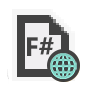
<style>
.page{position:relative;width:85px;height:85px;background:#ffffff}
.page>*{position:absolute;margin:0}
.t1{font:26.7px "SegoeUI-Bold";color:#424242}
</style>
<div class="page">
<p class="t1" style="left:27px;top:37px;width:27px;height:19px">F#</p>
</div>
